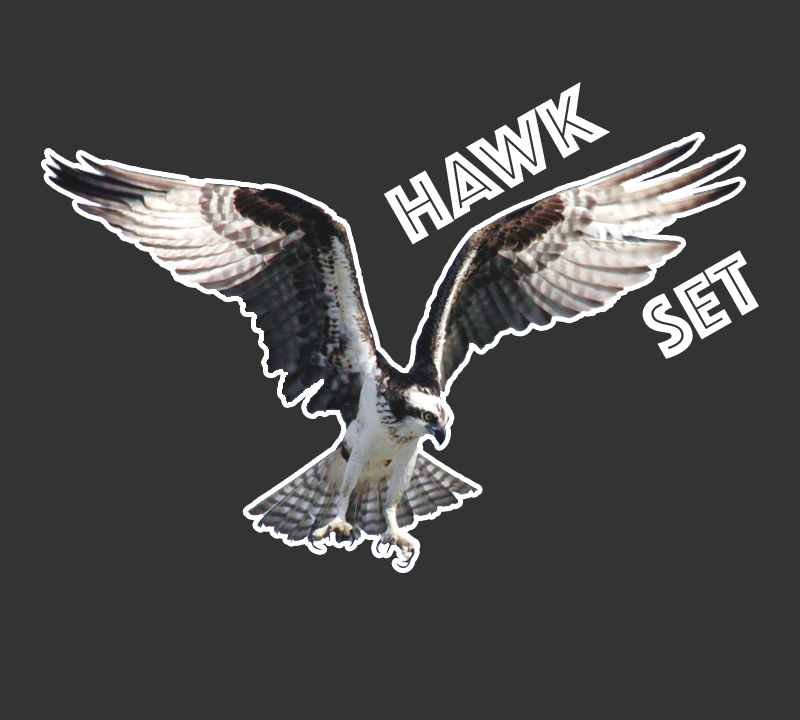
<style>
.page{position:relative;width:800px;height:720px;background:#333333}
.page>*{position:absolute;margin:0}
.t1{font:87px "Phosphate-Inline";color:#fefefe}
.t2{font:87px "Phosphate-Inline";color:#ffffff}
</style>
<div class="page">
<p class="t1" style="left:384px;top:82px;width:226px;height:163px;rotate:-30deg">HAWK</p>
<p class="t2" style="left:642px;top:250px;width:117px;height:109px;rotate:-30deg">Set</p>
</div>
